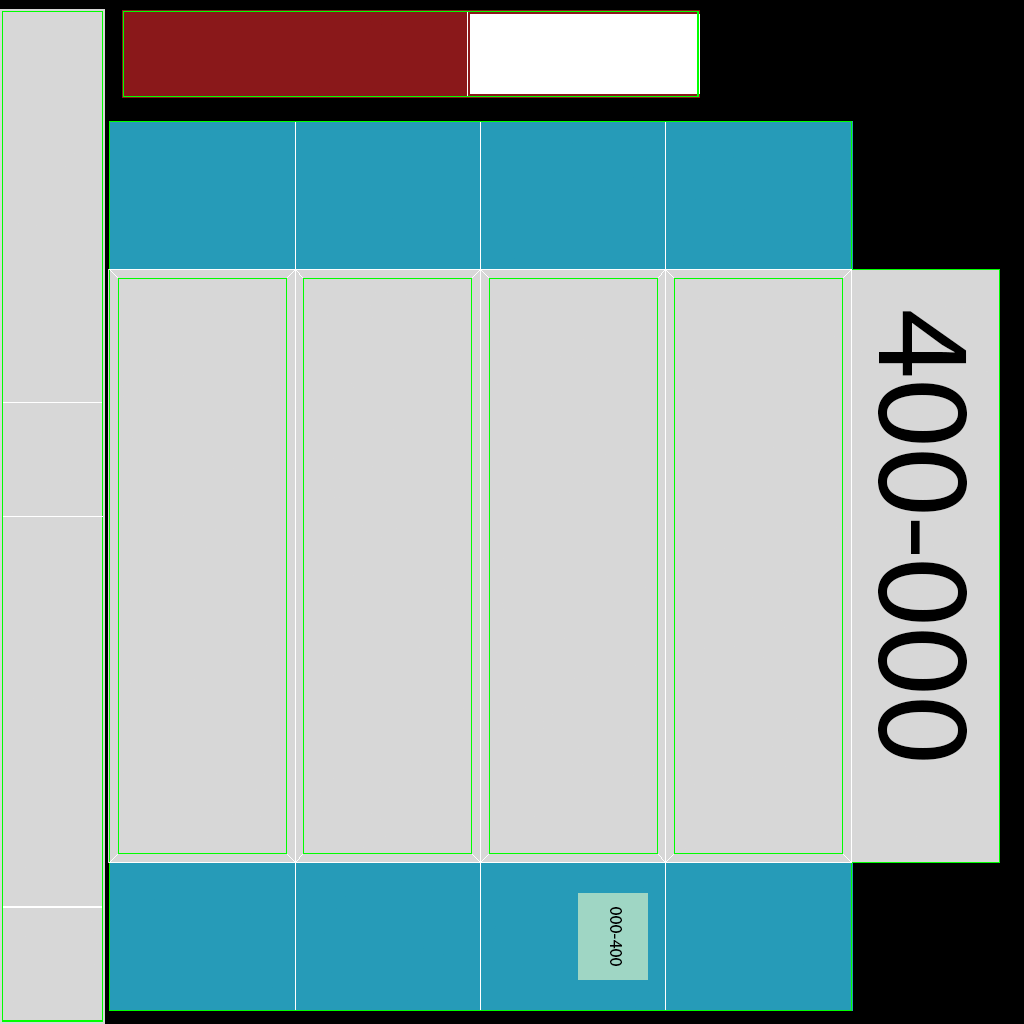
<style>
.page{position:relative;width:1024px;height:1024px;background:#d7d7d7}
.page>*{position:absolute;margin:0}
.t1{font:134.4px "MyriadPro-Regular";color:#000000}
.t2{font:18px "MyriadPro-Regular";color:#000000}
</style>
<div class="page">
<p class="t1" style="left:878px;top:311px;width:89px;height:449px;rotate:90deg">400-000</p>
<p class="t2" style="left:610px;top:907px;width:12px;height:59px;rotate:90deg">000-400</p>
</div>
